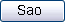
<style>
.page{position:relative;width:65px;height:22px}
.page>*{position:absolute;margin:0}
.t1{font:12.6px "ArialMT";color:#000000;scale:1.1 1}
</style>
<div class="page">
<p class="t1" style="left:18px;top:5px;width:23px;height:10px">Sao</p>
</div>
